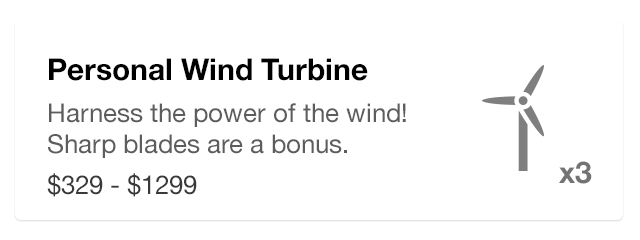
<style>
.page{position:relative;width:640px;height:240px;background:#ffffff}
.page>*{position:absolute;margin:0}
.t1{font:26px "HelveticaNeue";color:#5d5d5d}
.t2{font:30px "HelveticaNeue-Bold";color:#000000}
.t3{font:26px "HelveticaNeue";color:#393939}
.t4{font:30px "HelveticaNeue-Bold";color:#737373}
</style>
<div class="page">
<p class="t1" style="left:47px;top:58px;width:359px;height:139px"><span class="t2">Personal Wind Turbine<br></span>Harness the power of the wind! Sharp blades are a bonus.<br><span class="t3">$329 - $1299</span></p>
<p class="t4" style="left:559px;top:161px;width:33px;height:23px">x3</p>
</div>
